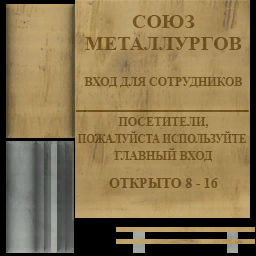
<style>
.page{position:relative;width:256px;height:256px}
.page>*{position:absolute;margin:0}
.t1{font:20px/22px "TimesNewRomanPS-BoldMT";color:#774c0a}
.t2{font:12px "TimesNewRomanPS-BoldMT";color:#774c0a}
.t3{font:12px/17px "TimesNewRomanPS-BoldMT";letter-spacing:-0.02em;color:#774c0a;scale:0.93 1}
.t4{font:12px/17px "TimesNewRomanPS-BoldMT";color:#774c0a}
.t5{font:14px/14px "TimesNewRomanPS-BoldMT";color:#774c0a}
</style>
<div class="page">
<p class="t1" style="left:85px;top:15px;width:157px;height:35px;text-align:center;opacity:0.81">СОЮЗ<br>МЕТАЛЛУРГОВ</p>
<p class="t2" style="left:84px;top:77px;width:159px;height:11px;opacity:0.81">ВХОД ДЛЯ СОТРУДНИКОВ</p>
<p class="t3" style="left:77px;top:117px;width:169px;height:71px;text-align:center;opacity:0.81"><span class="t4">ПОСЕТИТЕЛИ,<br></span>ПОЖАЛУЙСТА ИСПОЛЬЗУЙТЕ <br><span class="t4">ГЛАВНЫЙ ВХОД<br><br></span><span class="t5">ОТКРЫТО 8 - 16</span></p>
</div>
